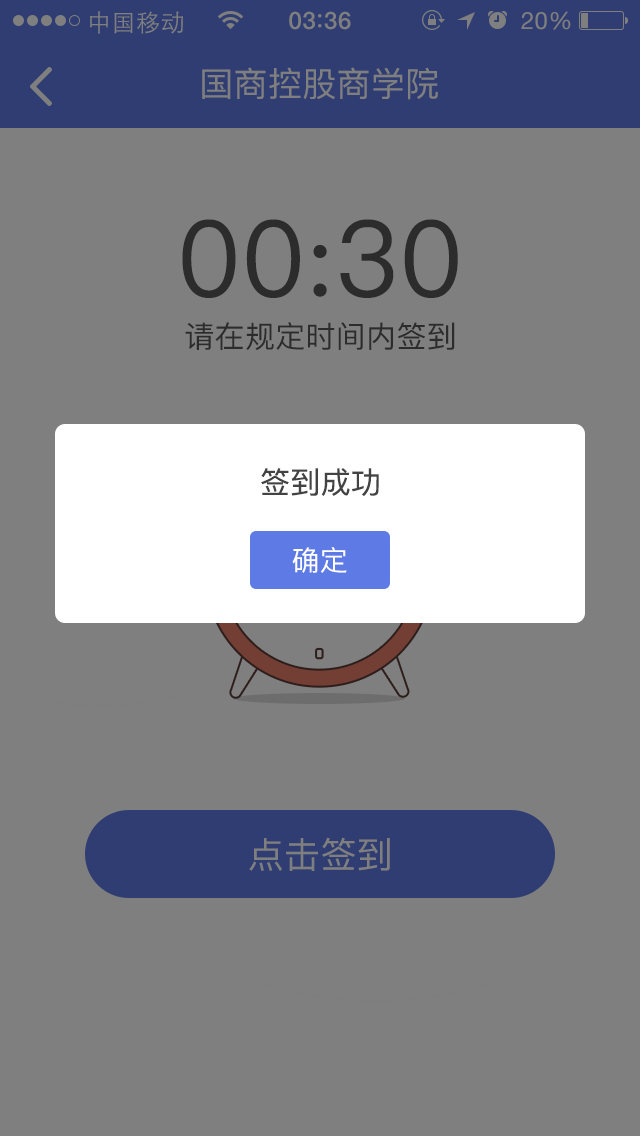
<style>
.page{position:relative;width:640px;height:1136px;background:#7f7f7f}
.page>*{position:absolute;margin:0}
.t1{font:24px "STHeitiSC-Light";letter-spacing:0.02em;color:#7f7f7f}
.t2{font:24px "HelveticaNeue-Medium";letter-spacing:0.03em;color:#7f7f7f}
.t3{font:24px "HelveticaNeue";letter-spacing:0.02em;color:#7f7f7f}
.t4{font:34px "PingFangSC-Regular";letter-spacing:0.01em;color:#7f7f7f}
.t5{font:105.7px "PingFangSC-Regular";letter-spacing:0.01em;color:#2c2c2c}
.t6{font:30px "PingFangSC-Regular";letter-spacing:0.01em;color:#2c2c2c}
.t7{font:30px "PingFangSC-Regular";letter-spacing:0.01em;color:#434343}
.t8{font:28px "PingFangSC-Regular";letter-spacing:0.01em;color:#ffffff}
.t9{font:36px "PingFangSC-Regular";letter-spacing:0.01em;color:#7f7f7f}
</style>
<div class="page">
<p class="t1" style="left:90px;top:11px;width:93px;height:23px">中国移动</p>
<p class="t2" style="left:289px;top:11px;width:62px;height:19px">03 36</p>
<p class="t3" style="left:521px;top:11px;width:50px;height:19px">20%</p>
<p class="t4" style="left:202px;top:67px;width:236px;height:33px">国商控股商学院</p>
<p class="t5" style="left:182px;top:219px;width:276px;height:79px">00:30</p>
<p class="t6" style="left:185px;top:322px;width:270px;height:28px">请在规定时间内签到</p>
<p class="t7" style="left:261px;top:468px;width:118px;height:28px">签到成功</p>
<p class="t8" style="left:292px;top:547px;width:55px;height:26px">确定</p>
<p class="t9" style="left:249px;top:837px;width:141px;height:34px">点击签到</p>
</div>
